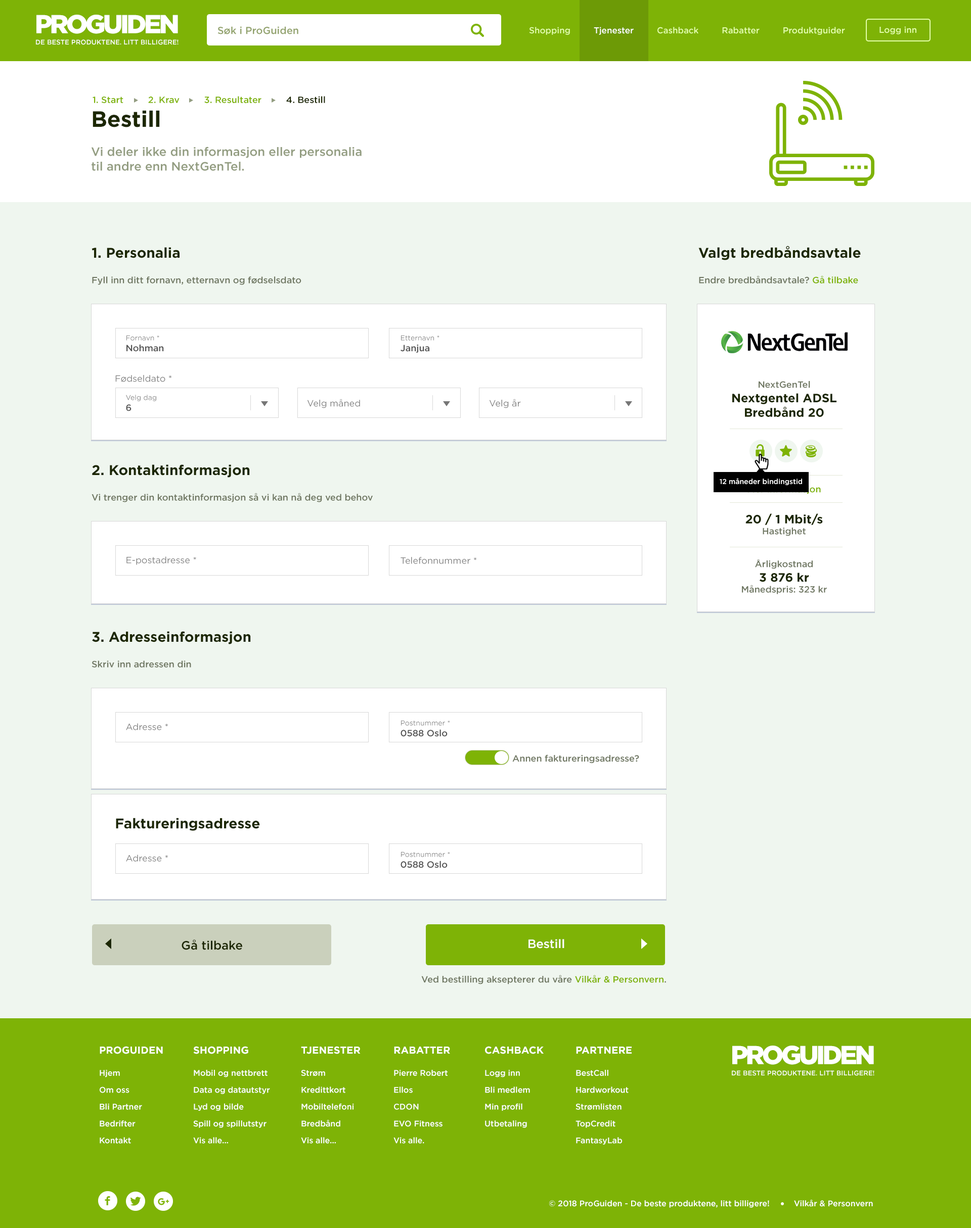
<style>
.page{position:relative;width:971px;height:1228px;background:#eff6ef}
.page>*{position:absolute;margin:0}
.t1{font:6.7px/11.2px "Gotham-Medium";color:#ffffff}
.t2{font:25.9px/43.1px "Gotham-Black";letter-spacing:-0.09em;color:#ffffff}
.t3{font:10.1px "Gotham-Medium";color:#93a36e}
.t4{font:8.6px "Gotham-Medium";color:#e4feaa}
.t5{font:8.6px "Gotham-Medium";color:#ffffff}
.t6{font:9.1px "Gotham-Medium";color:#7eb306}
.t7{font:9.1px "Gotham-Medium";color:#1c2702}
.t8{font:12.1px "Gotham-Medium";color:#939d81}
.t9{font:22.2px "Gotham-Bold";color:#1c2702}
.t10{font:9.1px "Gotham-Medium";color:#6f7762}
.t11{font:14.2px "Gotham-Bold";color:#1c2702}
.t12{font:7.1px "Gotham-Book";color:#828282}
.t13{font:9.1px "Gotham-Medium";color:#535353}
.t14{font:9.1px "Gotham-Book";color:#818181}
.t15{font:12.1px "Gotham-Bold";color:#1c2702}
.t16{font:7.1px "Gotham-Medium";color:#ffffff}
.t17{font:12.1px "Gotham-Medium";color:#1c2702}
.t18{font:12.1px "Gotham-Medium";color:#ffffff}
.t19{font:8.1px/16.9px "Gotham-Medium";color:#ffffff}
.t20{font:10.1px/5.2px "Gotham-Bold";color:#ffffff}
.t21{font:8.1px "Gotham-Medium";color:#ffffff}
</style>
<div class="page">
<p class="t1" style="left:36px;top:15px;width:142px;height:30px;text-align:center"><span class="t2">PROGUIDEN<br></span>DE BESTE PRODUKTENE. LITT BILLIGERE!</p>
<p class="t3" style="left:217px;top:26px;width:81px;height:8px">Søk i ProGuiden</p>
<p class="t4" style="left:529px;top:27px;width:316px;height:8px">Shopping         <span class="t5">Tjenester</span>         Cashback         Rabatter         Produktguider</p>
<p class="t4" style="left:879px;top:26px;width:37px;height:8px">Logg inn</p>
<p class="t6" style="left:93px;top:96px;width:232px;height:7px">1. Start         2. Krav         3. Resultater         <span class="t7">4. Bestill</span></p>
<p class="t8" style="left:91px;top:110px;width:270px;height:61px"><span class="t9">Bestill<br></span><br>Vi deler ikke din informasjon eller personalia <br>til andre enn NextGenTel.</p>
<p class="t10" style="left:698px;top:246px;width:162px;height:38px"><span class="t11">Valgt bredbåndsavtale<br><br></span>Endre bredbåndsavtale? <span class="t6">Gå tilbake</span></p>
<p class="t10" style="left:92px;top:247px;width:209px;height:38px"><span class="t11">1. Personalia<br><br></span>Fyll inn ditt fornavn, etternavn og fødselsdato</p>
<p class="t12" style="left:126px;top:335px;width:38px;height:17px">Fornavn *<br><span class="t13">Nohman</span></p>
<p class="t12" style="left:400px;top:335px;width:39px;height:18px">Etternavn *<br><span class="t13">Janjua</span></p>
<p class="t14" style="left:115px;top:375px;width:57px;height:7px">Fødseldato *</p>
<p class="t15" style="left:732px;top:381px;width:104px;height:214px;text-align:center"><span class="t10">NextGenTel<br></span>Nextgentel ADSL Bredbånd 20 <br><br><br><br><br><br><br><br><span class="t6">Mer informasjon<br><br><br></span>20 / 1 Mbit/s<br><span class="t10">Hastighet<br><br><br>Årligkostnad<br></span>3 876 kr<br><span class="t10">Månedspris: 323 kr</span></p>
<p class="t12" style="left:126px;top:395px;width:30px;height:17px">Velg dag<br><span class="t13">6</span></p>
<p class="t14" style="left:307px;top:399px;width:53px;height:9px">Velg måned</p>
<p class="t14" style="left:489px;top:399px;width:32px;height:9px">Velg år</p>
<p class="t10" style="left:92px;top:465px;width:281px;height:38px"><span class="t11">2. Kontaktinformasjon<br><br></span>Vi trenger din kontaktinformasjon så vi kan nå deg ved behov</p>
<p class="t16" style="left:719px;top:478px;width:83px;height:7px">12 måneder bindingstid</p>
<p class="t14" style="left:126px;top:557px;width:70px;height:8px">E-postadresse *</p>
<p class="t14" style="left:400px;top:557px;width:77px;height:7px">Telefonnummer *</p>
<p class="t10" style="left:92px;top:631px;width:159px;height:37px"><span class="t11">3. Adresseinformasjon<br><br></span>Skriv inn adressen din</p>
<p class="t14" style="left:126px;top:723px;width:42px;height:8px">Adresse *</p>
<p class="t12" style="left:400px;top:720px;width:50px;height:17px">Postnummer *<br><span class="t13">0588 Oslo</span></p>
<p class="t10" style="left:512px;top:755px;width:127px;height:8px">Annen faktureringsadresse?</p>
<p class="t11" style="left:116px;top:818px;width:144px;height:13px">Faktureringsadresse</p>
<p class="t14" style="left:126px;top:855px;width:42px;height:7px">Adresse *</p>
<p class="t12" style="left:400px;top:852px;width:50px;height:17px">Postnummer *<br><span class="t13">0588 Oslo</span></p>
<p class="t17" style="left:181px;top:940px;width:61px;height:10px">Gå tilbake</p>
<p class="t18" style="left:528px;top:939px;width:36px;height:10px">Bestill</p>
<p class="t10" style="left:421px;top:975px;width:245px;height:10px">Ved bestilling aksepterer du våre <span class="t6">Vilkår &amp; Personvern</span>.</p>
<p class="t19" style="left:100px;top:1046px;width:63px;height:98px"><span class="t20">PROGUIDEN<br><br></span>Hjem<br>Om oss<br>Bli Partner<br>Bedrifter<br>Kontakt</p>
<p class="t19" style="left:193px;top:1046px;width:77px;height:98px"><span class="t20">SHOPPING<br><br></span>Mobil og nettbrett<br>Data og datautstyr<br>Lyd og bilde<br>Spill og spillutstyr<br>Vis alle...</p>
<p class="t19" style="left:301px;top:1046px;width:59px;height:98px"><span class="t20">TJENESTER<br><br></span>Strøm<br>Kredittkort<br>Mobiltelefoni<br>Bredbånd <br>Vis alle...</p>
<p class="t19" style="left:393px;top:1047px;width:57px;height:97px"><span class="t20">RABATTER<br><br></span>Pierre Robert<br>Ellos<br>CDON<br>EVO Fitness<br>Vis alle.</p>
<p class="t19" style="left:485px;top:1046px;width:58px;height:82px"><span class="t20">CASHBACK <br><br></span>Logg inn<br>Bli medlem<br>Min profil<br>Utbetaling</p>
<p class="t19" style="left:575px;top:1047px;width:56px;height:98px"><span class="t20">PARTNERE<br><br></span>BestCall<br>Hardworkout<br>Strømlisten<br>TopCredit<br>FantasyLab</p>
<p class="t1" style="left:732px;top:1046px;width:142px;height:30px;text-align:center"><span class="t2">PROGUIDEN<br></span>DE BESTE PRODUKTENE. LITT BILLIGERE!</p>
<p class="t21" style="left:549px;top:1200px;width:324px;height:8px">© 2018 ProGuiden - De beste produktene, litt billigere!          Vilkår &amp; Personvern</p>
</div>
